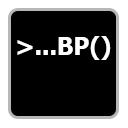
<style>
.page{position:relative;width:128px;height:128px;background:#000000}
.page>*{position:absolute;margin:0}
.t1{font:24px "Tahoma-Bold";color:#ffffff}
</style>
<div class="page">
<p class="t1" style="left:17px;top:36px;width:94px;height:24px">&gt;...BP()</p>
</div>
